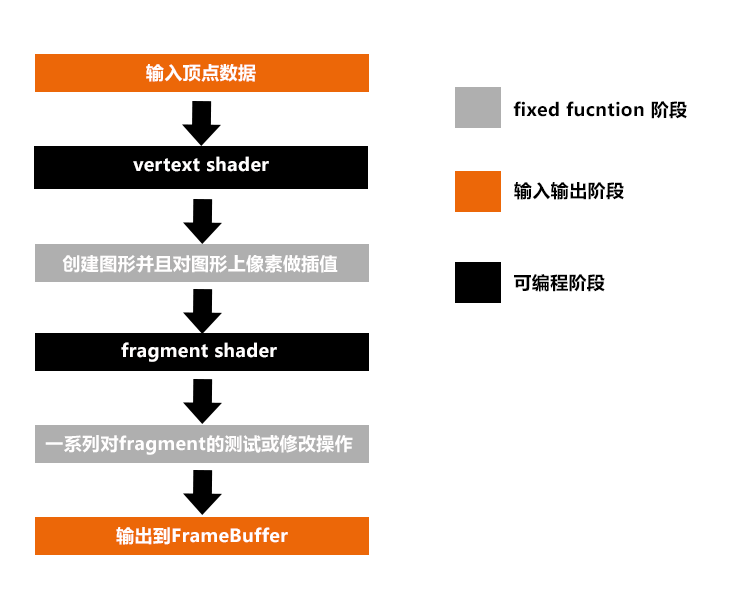
<style>
.page{position:relative;width:736px;height:600px;background:#ffffff}
.page>*{position:absolute;margin:0}
.t1{font:18px "MicrosoftYaHeiUI-Bold";letter-spacing:0.02em;color:#fffefe}
.t2{font:18px "MicrosoftYaHeiUI-Bold";letter-spacing:0.02em;color:#000000}
</style>
<div class="page">
<p class="t1" style="left:146px;top:64px;width:110px;height:18px">输入顶点数据</p>
<p class="t2" style="left:513px;top:101px;width:174px;height:18px">fixed fucntion 阶段</p>
<p class="t1" style="left:133px;top:156px;width:136px;height:16px">vertext shader</p>
<p class="t2" style="left:514px;top:182px;width:110px;height:18px">输入输出阶段</p>
<p class="t1" style="left:62px;top:254px;width:276px;height:19px">创建图形并且对图形上像素做插值</p>
<p class="t2" style="left:514px;top:274px;width:91px;height:18px">可编程阶段</p>
<p class="t1" style="left:121px;top:342px;width:156px;height:20px">fragment shader</p>
<p class="t1" style="left:45px;top:435px;width:308px;height:20px">一系列对fragment的测试或修改操作</p>
<p class="t1" style="left:116px;top:527px;width:172px;height:18px">输出到FrameBuffer</p>
</div>
